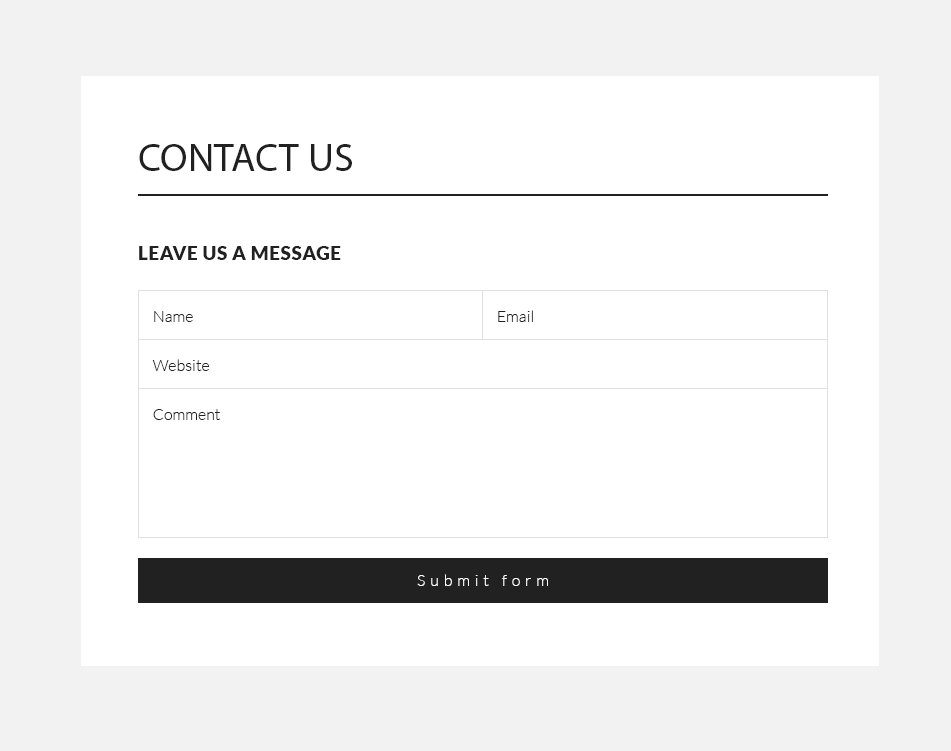
<style>
.page{position:relative;width:951px;height:751px;background:#ffffff}
.page>*{position:absolute;margin:0}
.t1{font:40px "MyriadPro-Regular";color:#212121;text-transform:uppercase}
.t2{font:19px "Lato-Black";letter-spacing:0.03em;color:#212121;text-transform:uppercase}
.t3{font:16px "Lato-Light";color:#212121}
.t4{font:16px "Lato-Light";letter-spacing:0.3em;color:#ffffff}
</style>
<div class="page">
<p class="t1" style="left:139px;top:144px;width:213px;height:27px">Contact us</p>
<p class="t2" style="left:139px;top:246px;width:202px;height:14px">Leave us a message</p>
<p class="t3" style="left:154px;top:311px;width:39px;height:11px">Name</p>
<p class="t3" style="left:498px;top:310px;width:35px;height:12px">Email</p>
<p class="t3" style="left:152px;top:359px;width:57px;height:12px">Website</p>
<p class="t3" style="left:153px;top:409px;width:68px;height:11px">Comment</p>
<p class="t4" style="left:417px;top:574px;width:131px;height:12px">Submit form</p>
</div>
